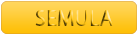
<style>
.page{position:relative;width:138px;height:35px}
.page>*{position:absolute;margin:0}
.t1{font:23px "MyriadPro-Regular";scale:0.96 1}
</style>
<div class="page">
<p class="t1" style="left:35px;top:10px;width:78px;height:16px">SEMULA</p>
</div>
